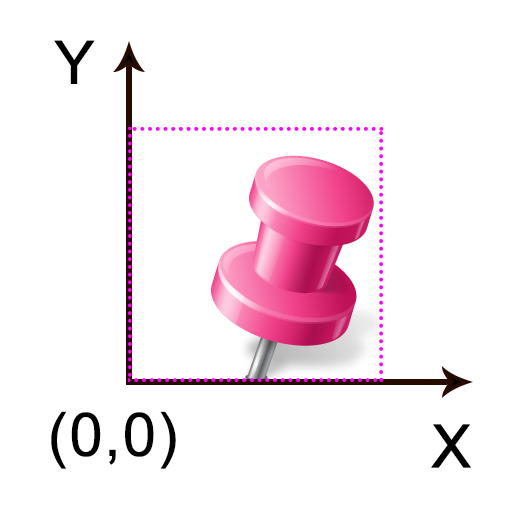
<style>
.page{position:relative;width:512px;height:512px;background:#ffffff}
.page>*{position:absolute;margin:0}
.t1{font:60px "ArialMT";color:#000000;font-weight:bold}
</style>
<div class="page">
<p class="t1" style="left:54px;top:40px;width:41px;height:44px">Y</p>
<p class="t1" style="left:51px;top:411px;width:125px;height:58px">(0,0)</p>
<p class="t1" style="left:431px;top:424px;width:40px;height:44px">X</p>
</div>
